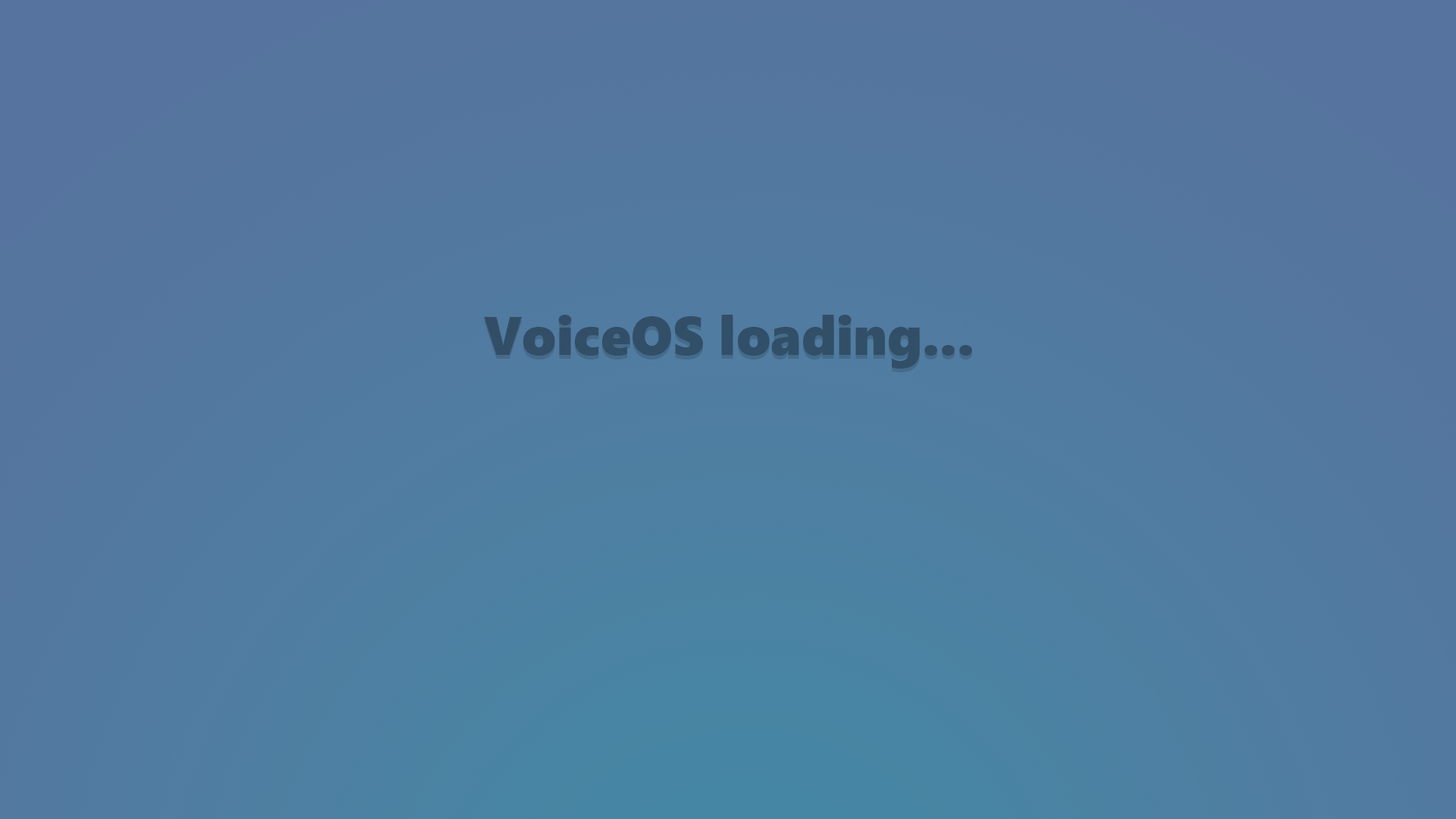
<style>
.page{position:relative;width:1456px;height:819px}
.page>*{position:absolute;margin:0}
.t1{font:54.6px "SegoeUIBlack";color:#324f68}
</style>
<div class="page">
<p class="t1" style="left:484px;top:315px;width:488px;height:54px">VoiceOS loading...</p>
</div>
